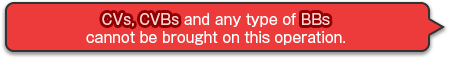
<style>
.page{position:relative;width:450px;height:58px;background:#ed3b3b}
.page>*{position:absolute;margin:0}
.t1{font:14px/18px "GothicMB101Pro-Regular";color:#ffffff}
.t2{font:14px/18px "GothicMB101Pro-Regular";color:#ffd3d3}
</style>
<div class="page">
<p class="t1" style="left:86px;top:13px;width:259px;height:32px;text-align:center"><span class="t2">CVs, CVBs</span> and any type of <span class="t2">BBs<br></span>cannot be brought on this operation.</p>
<p class="t1" style="left:86px;top:13px;width:259px;height:32px;text-align:center"><span class="t2">CVs, CVBs</span> and any type of <span class="t2">BBs<br></span>cannot be brought on this operation.</p>
</div>
